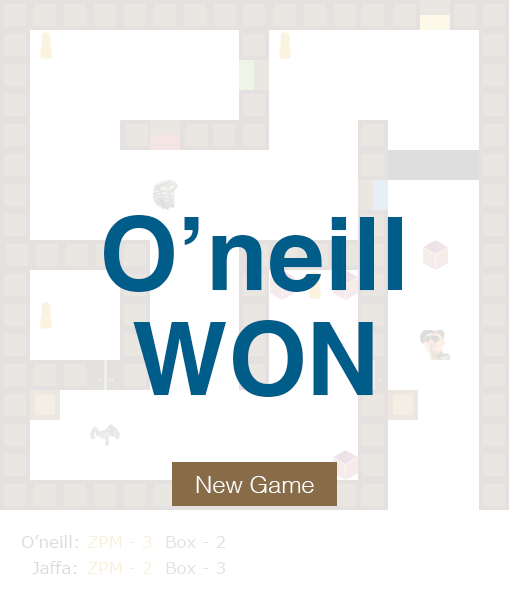
<style>
.page{position:relative;width:509px;height:600px;background:#ffffff}
.page>*{position:absolute;margin:0}
.t1{font:101.3px "Helvetica-Bold";color:#005d89}
.t2{font:23.9px "Helvetica-Light";color:#ffffff}
.t3{font:16.7px "Verdana";color:#dbdbdb}
.t4{font:16.7px "Verdana";color:#f9f1de}
.t5{font:16.7px "Verdana";color:#e4e1e0}
</style>
<div class="page">
<p class="t1" style="left:104px;top:215px;width:298px;height:77px">O’neill</p>
<p class="t1" style="left:133px;top:320px;width:240px;height:77px">WON</p>
<p class="t2" style="left:196px;top:476px;width:118px;height:17px">New Game</p>
<p class="t3" style="left:21px;top:535px;width:57px;height:13px">O’neill:</p>
<p class="t4" style="left:87px;top:536px;width:65px;height:12px">ZPM - 3</p>
<p class="t5" style="left:166px;top:536px;width:60px;height:12px">Box - 2</p>
<p class="t3" style="left:32px;top:561px;width:45px;height:13px">Jaffa:</p>
<p class="t4" style="left:87px;top:562px;width:65px;height:12px">ZPM - 2</p>
<p class="t5" style="left:166px;top:562px;width:60px;height:12px">Box - 3</p>
</div>
